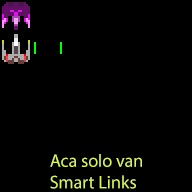
<style>
.page{position:relative;width:192px;height:192px;background:#000000}
.page>*{position:absolute;margin:0}
.t1{font:18px "MyriadPro-Regular";color:#daf55e}
</style>
<div class="page">
<p class="t1" style="left:50px;top:154px;width:92px;height:35px">Aca solo van <br>Smart Links</p>
</div>
